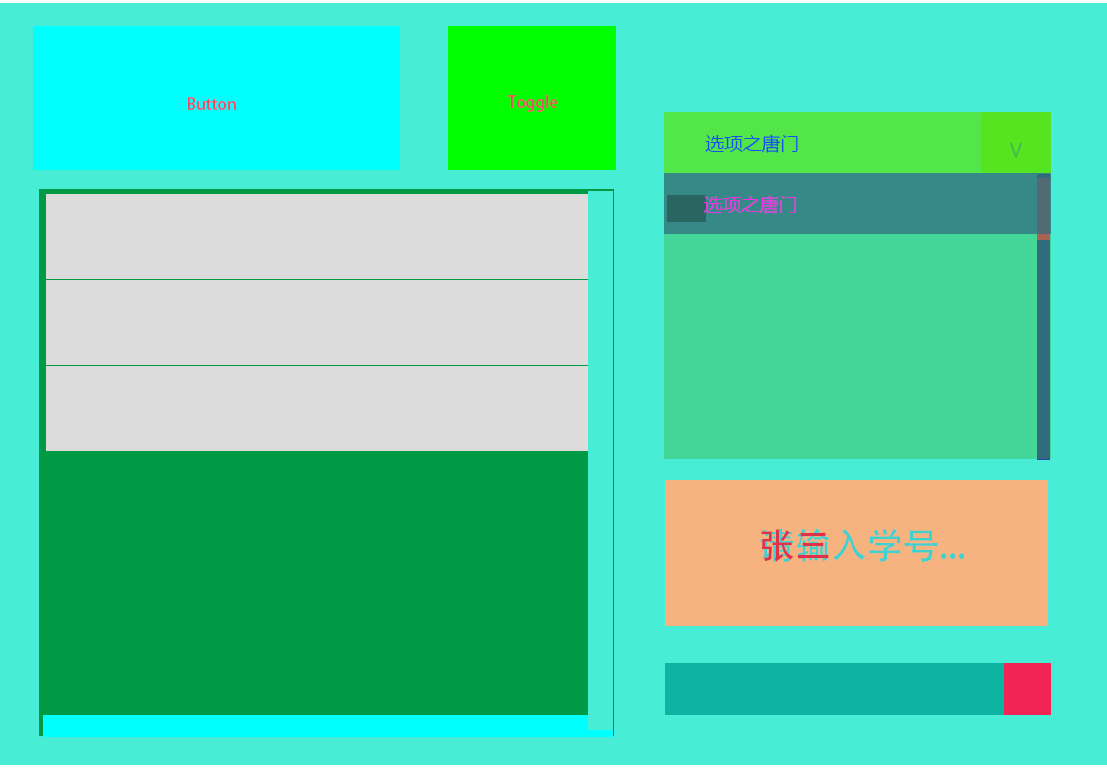
<style>
.page{position:relative;width:1107px;height:768px;background:#47edd4}
.page>*{position:absolute;margin:0}
.t1{font:16px "AdobeHeitiStd-Regular";color:#ed4762}
.t2{font:18.5px "MicrosoftYaHei";color:#1b50e8}
.t3{font:18.5px "MicrosoftYaHei";color:#eb35e5}
.t4{font:36px "AdobeHeitiStd-Regular";color:#40d1cf}
.t5{font:36px "AdobeHeitiStd-Regular";color:#e0314a}
</style>
<div class="page">
<p class="t1" style="left:187px;top:97px;width:49px;height:13px">Button</p>
<p class="t1" style="left:507px;top:94px;width:50px;height:18px">Toggle</p>
<p class="t2" style="left:705px;top:134px;width:93px;height:19px">选项之唐门</p>
<p class="t3" style="left:703px;top:195px;width:93px;height:19px">选项之唐门</p>
<p class="t4" style="left:760px;top:528px;width:205px;height:34px">请输入学号...</p>
<p class="t5" style="left:761px;top:529px;width:68px;height:33px">张三</p>
</div>
